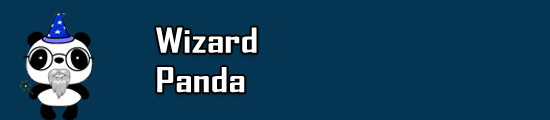
<style>
.page{position:relative;width:550px;height:120px;background:#043654}
.page>*{position:absolute;margin:0}
.t1{font:32.9px "AgencyFB-Bold";color:#ffffff;scale:1.33 1}
</style>
<div class="page">
<p class="t1" style="left:156px;top:27px;width:101px;height:66px">Wizard <br>Panda</p>
</div>
